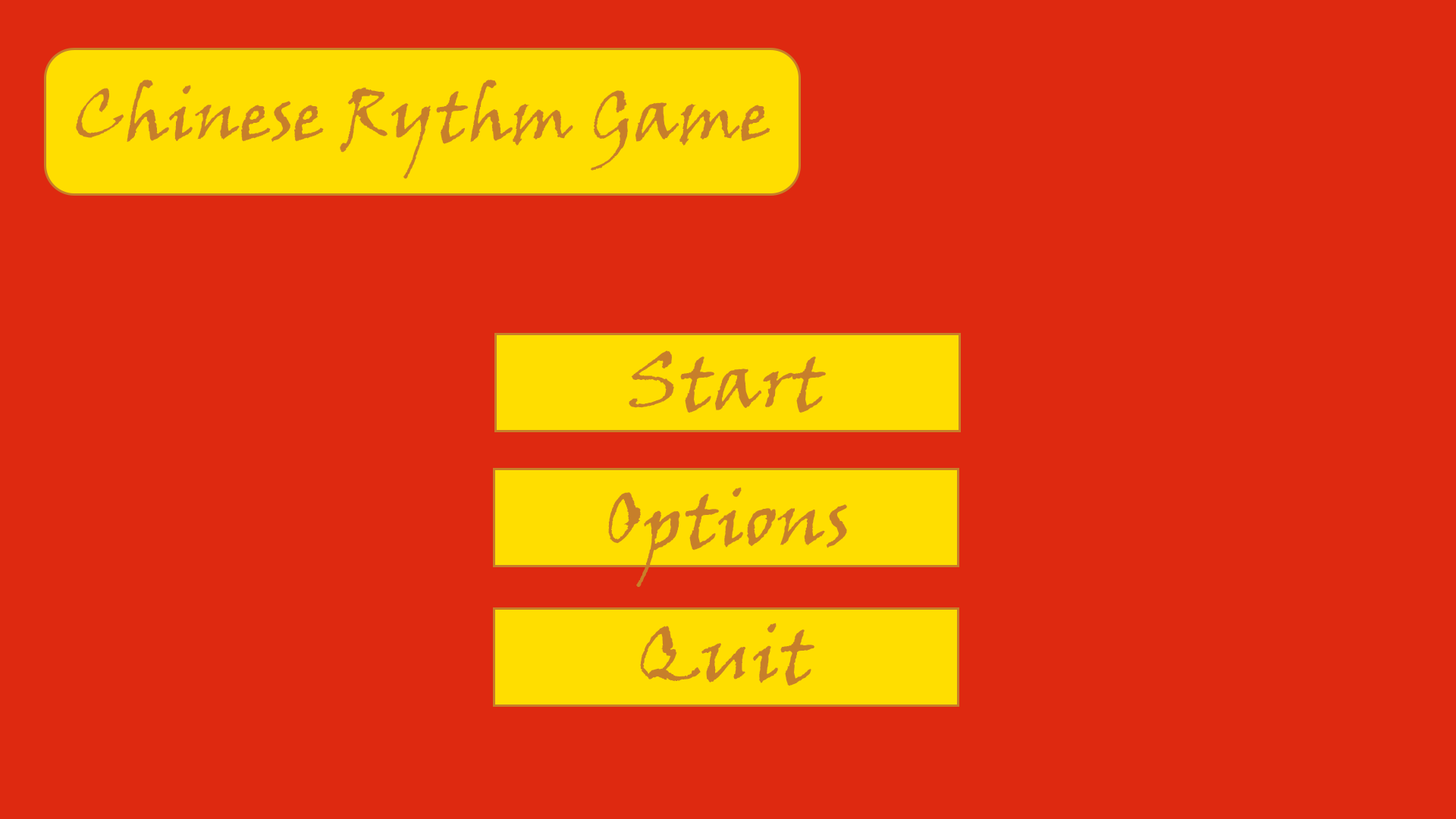
<style>
.page{position:relative;width:1456px;height:819px;background:#de2910}
.page>*{position:absolute;margin:0}
.t1{font:70.7px "VinerHandITC";color:#c77f2a}
.t2{font:75.4px "VinerHandITC";color:#c77f2a}
</style>
<div class="page">
<p class="t1" style="left:76px;top:80px;width:694px;height:99px">Chinese Rythm Game</p>
<p class="t2" style="left:629px;top:350px;width:198px;height:63px">Start</p>
<p class="t2" style="left:608px;top:487px;width:239px;height:100px">Options</p>
<p class="t2" style="left:640px;top:623px;width:175px;height:63px">Quit</p>
</div>
